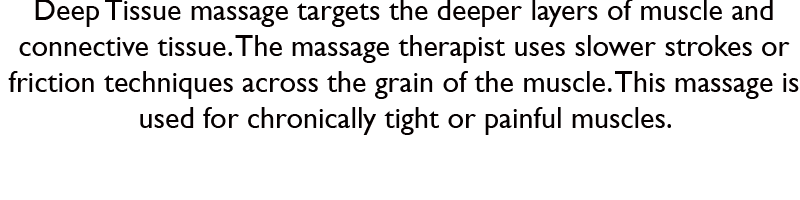
<style>
.page{position:relative;width:800px;height:200px;background:#ffffff}
.page>*{position:absolute;margin:0}
.t1{font:30px "GillSansMT";color:#050000}
</style>
<div class="page">
<p class="t1" style="left:8px;top:0px;width:791px;height:135px;text-align:center">Deep Tissue massage targets the deeper layers of muscle and connective tissue. The massage therapist uses slower strokes or friction techniques across the grain of the muscle. This massage is used for chronically tight or painful muscles.</p>
</div>
